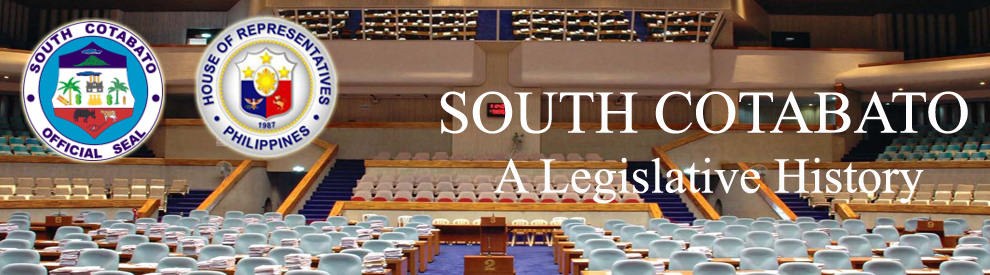
<style>
.page{position:relative;width:990px;height:275px}
.page>*{position:absolute;margin:0}
.t1{font:50px "TimesNewRomanPSMT";color:#fdfcfc}
.t2{font:60.4px "TimesNewRomanPSMT";color:#fdfdfd}
</style>
<div class="page">
<p class="t1" style="left:440px;top:91px;width:528px;height:113px;text-align:center"><span class="t2">SOUTH COTABATO<br></span>A Legislative History</p>
</div>
